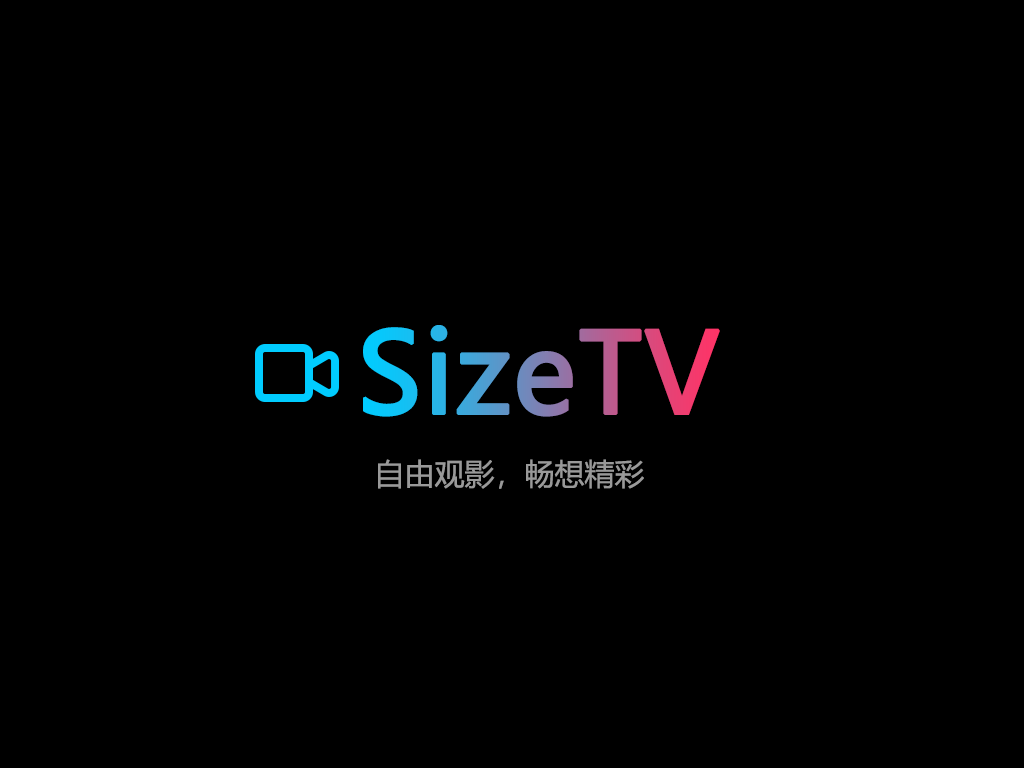
<style>
.page{position:relative;width:1024px;height:768px;background:#000000}
.page>*{position:absolute;margin:0}
.t1{font:110px "MicrosoftYaHei";font-weight:bold}
.t2{font:30px "MicrosoftYaHei";color:#999999}
</style>
<div class="page">
<p class="t1" style="left:363px;top:325px;width:357px;height:92px">SizeTV</p>
<p class="t2" style="left:378px;top:459px;width:266px;height:30px">自由观影，畅想精彩</p>
</div>
